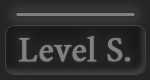
<style>
.page{position:relative;width:150px;height:80px}
.page>*{position:absolute;margin:0}
.t1{font:42.3px "AdobeThai-Regular";color:#818181;font-weight:bold}
</style>
<div class="page">
<p class="t1" style="left:19px;top:36px;width:111px;height:26px">Level S.</p>
</div>
